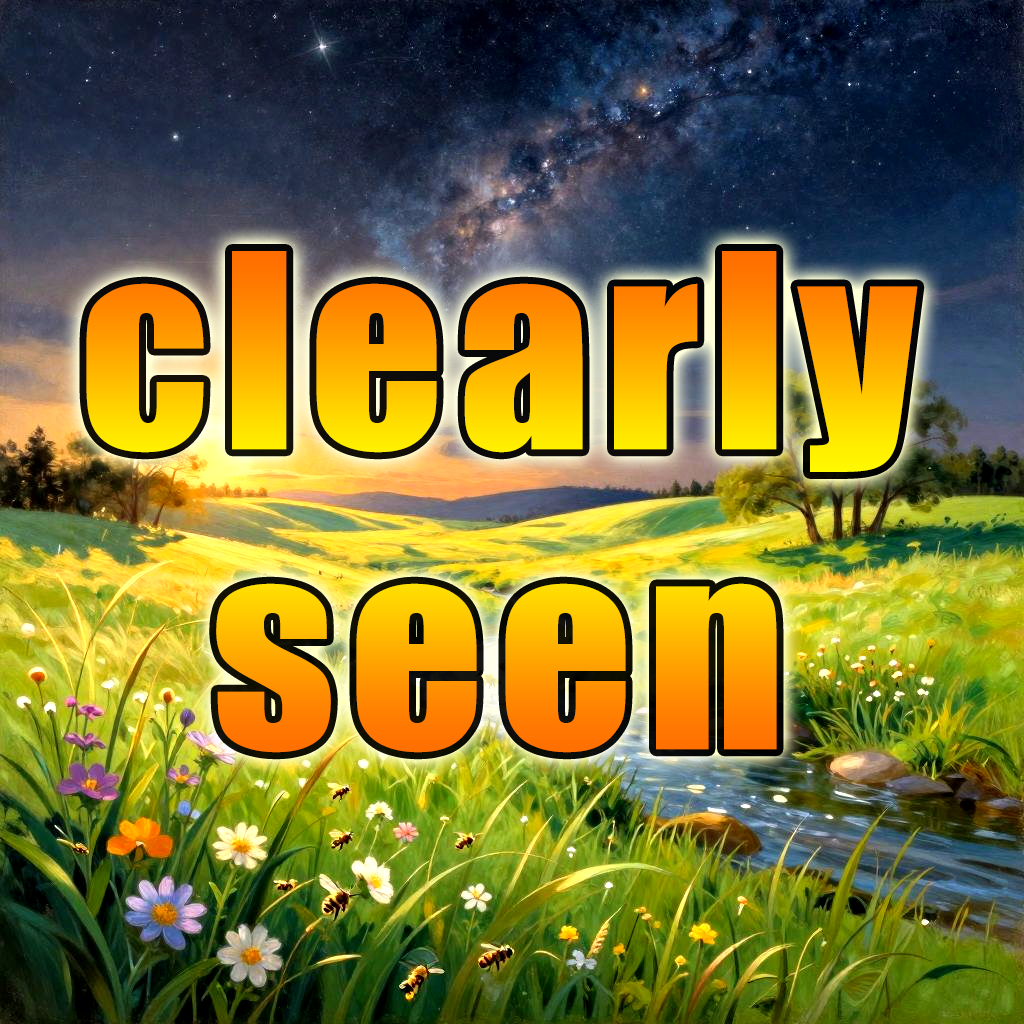
<style>
.page{position:relative;width:1024px;height:1024px}
.page>*{position:absolute;margin:0}
.t1{font:250.2px "Impact";letter-spacing:0.025em;font-weight:bold;scale:1.05 1}
</style>
<div class="page">
<p class="t1" style="left:86px;top:251px;width:832px;height:502px;text-align:center">clearly<br>seen</p>
</div>
